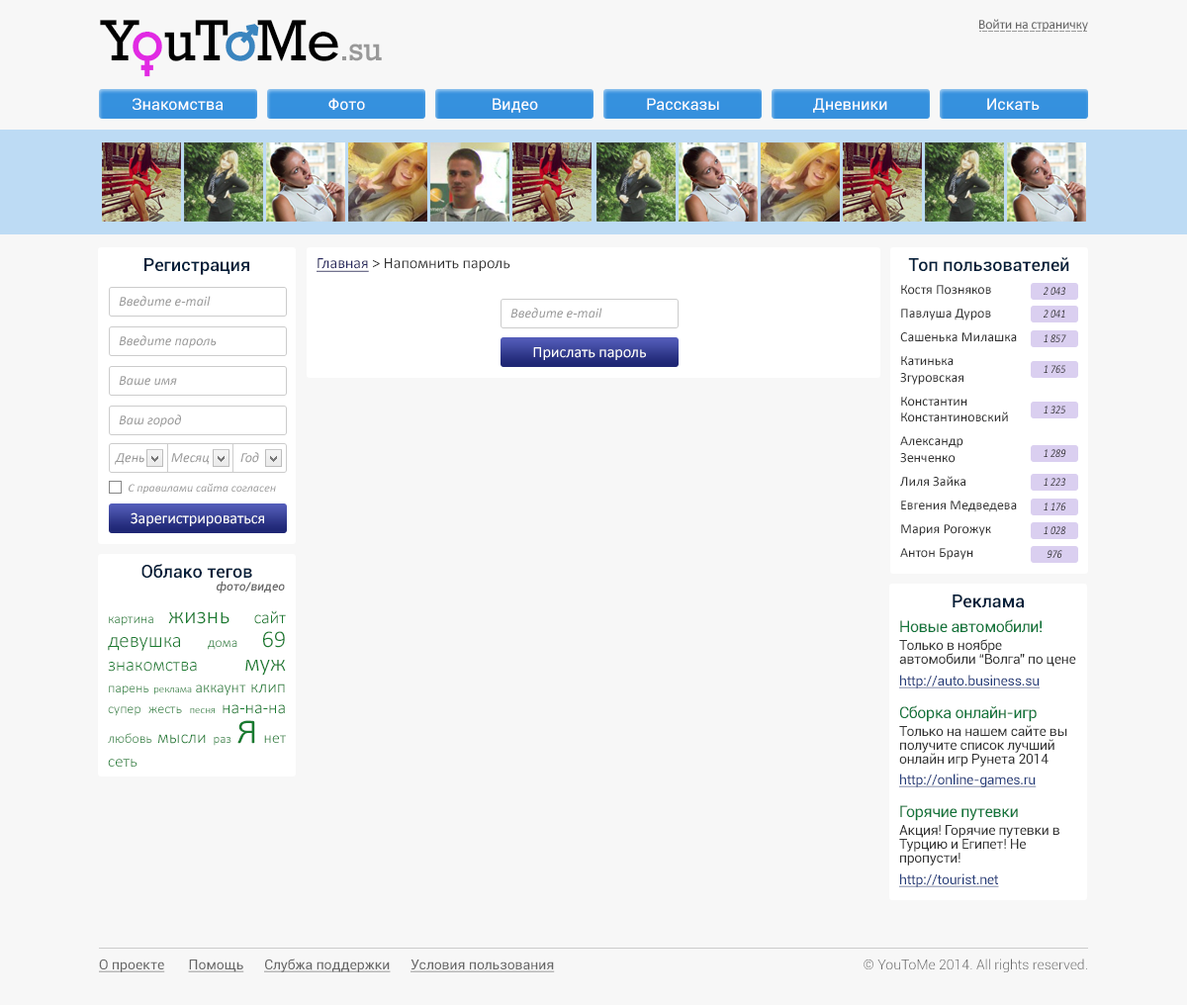
<style>
.page{position:relative;width:1187px;height:1005px;background:#f7f7f7}
.page>*{position:absolute;margin:0}
.t1{font:33.8px "Rockwell";letter-spacing:-0.02em;color:#999999}
.t2{font:59.2px "Rockwell";letter-spacing:-0.02em;color:#000000}
.t3{font:59.2px "Rockwell";letter-spacing:-0.02em;color:#e12ae3}
.t4{font:59.2px "Rockwell";letter-spacing:-0.02em;color:#3a85bf}
.t5{font:13.8px "Calibri";letter-spacing:-0.02em;color:#666666}
.t6{font:15.8px "Roboto-Regular";color:#ffffff}
.t7{font:17.8px "Roboto-Medium";color:#041f3a}
.t8{font:15.8px "Calibri";color:#333333}
.t9{font:15.8px "Calibri";color:#25265d;text-decoration:underline}
.t10{font:13.8px "Calibri";color:#333333}
.t11{font:11.9px "Calibri-Italic";color:#2d2d2d;scale:0.83 1}
.t12{font:13.8px "Calibri-Italic";color:#999999}
.t13{font:11.9px "Calibri-Italic";scale:0.83 1}
.t14{font:15.8px "Calibri";color:#ffffff}
.t15{font:11.9px "Calibri-Italic";color:#999999}
.t16{font:11.9px "Roboto-MediumItalic";color:#666666}
.t17{font:13.8px "Calibri-Light";color:#197b30}
.t18{font:23.7px "Calibri-Light";color:#197b30}
.t19{font:17.8px "Calibri-Light";color:#197b30}
.t20{font:20.8px/23.7px "Calibri-Light";color:#197b30}
.t21{font:13.8px/23.7px "Calibri-Light";color:#197b30}
.t22{font:23.7px/23.7px "Calibri-Light";color:#197b30}
.t23{font:18.8px/23.7px "Calibri-Light";color:#197b30}
.t24{font:10.9px "Calibri-Light";color:#197b30}
.t25{font:15.8px "Calibri-Light";color:#197b30}
.t26{font:12.9px/29.7px "Calibri-Light";color:#197b30}
.t27{font:47.5px/29.7px "Calibri-Light";color:#197b30}
.t28{font:15.8px/29.7px "Calibri-Light";color:#197b30}
.t29{font:16.8px/23.7px "Calibri-Light";color:#197b30}
.t30{font:15.8px "Roboto-Regular";letter-spacing:-0.02em;color:#11753b}
.t31{font:13.8px/13.8px "Roboto-Regular";letter-spacing:-0.02em;color:#333333}
.t32{font:13.8px "Roboto-Regular";letter-spacing:-0.02em;color:#233c7a;text-decoration:underline}
.t33{font:13.8px "Roboto-Regular";color:#666666;text-decoration:underline}
.t34{font:13.8px "Roboto-Light";color:#666666}
</style>
<div class="page">
<p class="t1" style="left:100px;top:20px;width:282px;height:41px"><span class="t2">Y</span><span class="t3">o</span><span class="t2">uT</span><span class="t4">o</span><span class="t2">Me</span>.su</p>
<p class="t5" style="left:979px;top:19px;width:109px;height:13px">Войти на страничку</p>
<p class="t6" style="left:133px;top:98px;width:91px;height:13px">Знакомства</p>
<p class="t6" style="left:328px;top:98px;width:37px;height:12px">Фото</p>
<p class="t6" style="left:493px;top:98px;width:45px;height:15px">Видео</p>
<p class="t6" style="left:647px;top:98px;width:72px;height:13px">Рассказы</p>
<p class="t6" style="left:813px;top:98px;width:74px;height:15px">Дневники</p>
<p class="t6" style="left:987px;top:98px;width:52px;height:13px">Искать</p>
<p class="t7" style="left:908px;top:257px;width:161px;height:15px">Топ пользователей</p>
<p class="t7" style="left:144px;top:258px;width:105px;height:17px">Регистрация</p>
<p class="t8" style="left:316px;top:258px;width:194px;height:14px"><span class="t9">Главная </span>&gt; Напомнить пароль</p>
<p class="t10" style="left:900px;top:285px;width:117px;height:275px">Костя Позняков<br><br>Павлуша Дуров<br><br>Сашенька Милашка<br><br>Катинька Згуровская<br><br>Константин Константиновский<br><br>Александр Зенченко<br><br>Лиля Зайка<br><br>Евгения Медведева<br><br>Мария Рогожук<br><br>Антон Браун</p>
<p class="t11" style="left:1043px;top:287px;width:22px;height:8px">2 043</p>
<p class="t12" style="left:119px;top:296px;width:92px;height:11px">Введите e-mail</p>
<p class="t12" style="left:510px;top:308px;width:92px;height:10px">Введите e-mail</p>
<p class="t11" style="left:1043px;top:310px;width:22px;height:7px">2 041</p>
<p class="t12" style="left:119px;top:335px;width:98px;height:13px">Введите пароль</p>
<p class="t13" style="left:1043px;top:334px;width:23px;height:8px">1 857</p>
<p class="t14" style="left:533px;top:347px;width:113px;height:13px">Прислать пароль</p>
<p class="t13" style="left:1043px;top:365px;width:22px;height:8px">1 765</p>
<p class="t12" style="left:119px;top:376px;width:58px;height:10px">Ваше имя</p>
<p class="t13" style="left:1043px;top:405px;width:22px;height:8px">1 325</p>
<p class="t12" style="left:119px;top:414px;width:62px;height:13px">Ваш город</p>
<p class="t13" style="left:1043px;top:449px;width:23px;height:8px">1 289</p>
<p class="t12" style="left:115px;top:453px;width:29px;height:12px">День</p>
<p class="t12" style="left:171px;top:453px;width:38px;height:12px">Месяц</p>
<p class="t12" style="left:240px;top:452px;width:19px;height:11px">Год</p>
<p class="t15" style="left:129px;top:484px;width:147px;height:9px">С правилами сайта согласен</p>
<p class="t13" style="left:1043px;top:478px;width:22px;height:8px">1 223</p>
<p class="t11" style="left:1043px;top:502px;width:23px;height:8px">1 176</p>
<p class="t14" style="left:131px;top:512px;width:133px;height:14px">Зарегистрироваться</p>
<p class="t13" style="left:1043px;top:526px;width:23px;height:8px">1 028</p>
<p class="t13" style="left:1046px;top:550px;width:16px;height:8px">976</p>
<p class="t7" style="left:141px;top:564px;width:111px;height:15px">Облако тегов</p>
<p class="t16" style="left:217px;top:581px;width:68px;height:12px">фото/видео</p>
<p class="t7" style="left:952px;top:594px;width:73px;height:14px">Реклама</p>
<p class="t17" style="left:108px;top:610px;width:178px;height:156px;text-align:justify">картина <span class="t18">жизнь </span><span class="t19">сайт </span><span class="t20">девушка </span><span class="t21">дома </span><span class="t22">69 </span><span class="t23">знакомства </span><span class="t22">муж </span>парень <span class="t24">реклама </span><span class="t25">аккаунт </span><span class="t19">клип </span>супер жесть <span class="t24">песня </span><span class="t19">на-на-на </span>любовь <span class="t19">мысли </span><span class="t26">раз </span><span class="t27">я </span><span class="t28">нет </span><span class="t29">сеть</span></p>
<p class="t30" style="left:900px;top:619px;width:141px;height:14px">Новые автомобили!</p>
<p class="t31" style="left:899px;top:639px;width:177px;height:28px">Только в ноябре автомобили “Волга” по цене “Жигулей”</p>
<p class="t32" style="left:899px;top:674px;width:140px;height:14px">http://auto.business.su</p>
<p class="t30" style="left:900px;top:705px;width:136px;height:17px">Сборка онлайн-игр</p>
<p class="t31" style="left:899px;top:725px;width:168px;height:41px">Только на нашем сайте вы получите список лучший онлайн игр Рунета 2014 года</p>
<p class="t32" style="left:899px;top:773px;width:137px;height:14px">http://online-games.ru</p>
<p class="t30" style="left:900px;top:805px;width:118px;height:16px">Горячие путевки</p>
<p class="t31" style="left:899px;top:825px;width:160px;height:40px">Акция! Горячие путевки в Турцию и Египет! Не пропусти!</p>
<p class="t32" style="left:899px;top:873px;width:100px;height:14px">http://tourist.net</p>
<p class="t33" style="left:99px;top:958px;width:456px;height:14px">О проекте       Помощь      Слубжа поддержки      Условия пользования</p>
<p class="t34" style="left:863px;top:958px;width:224px;height:14px">© YouToMe 2014. All rights reserved.</p>
</div>
